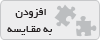
<style>
.page{position:relative;width:100px;height:40px;background:#ededee}
.page>*{position:absolute;margin:0}
.t1{font:11.4px "BYekan";color:#231f20}
</style>
<div class="page">
<p class="t1" style="left:7px;top:8px;width:45px;height:27px;text-align:center">افزودن <br>به مقـایسه</p>
</div>
